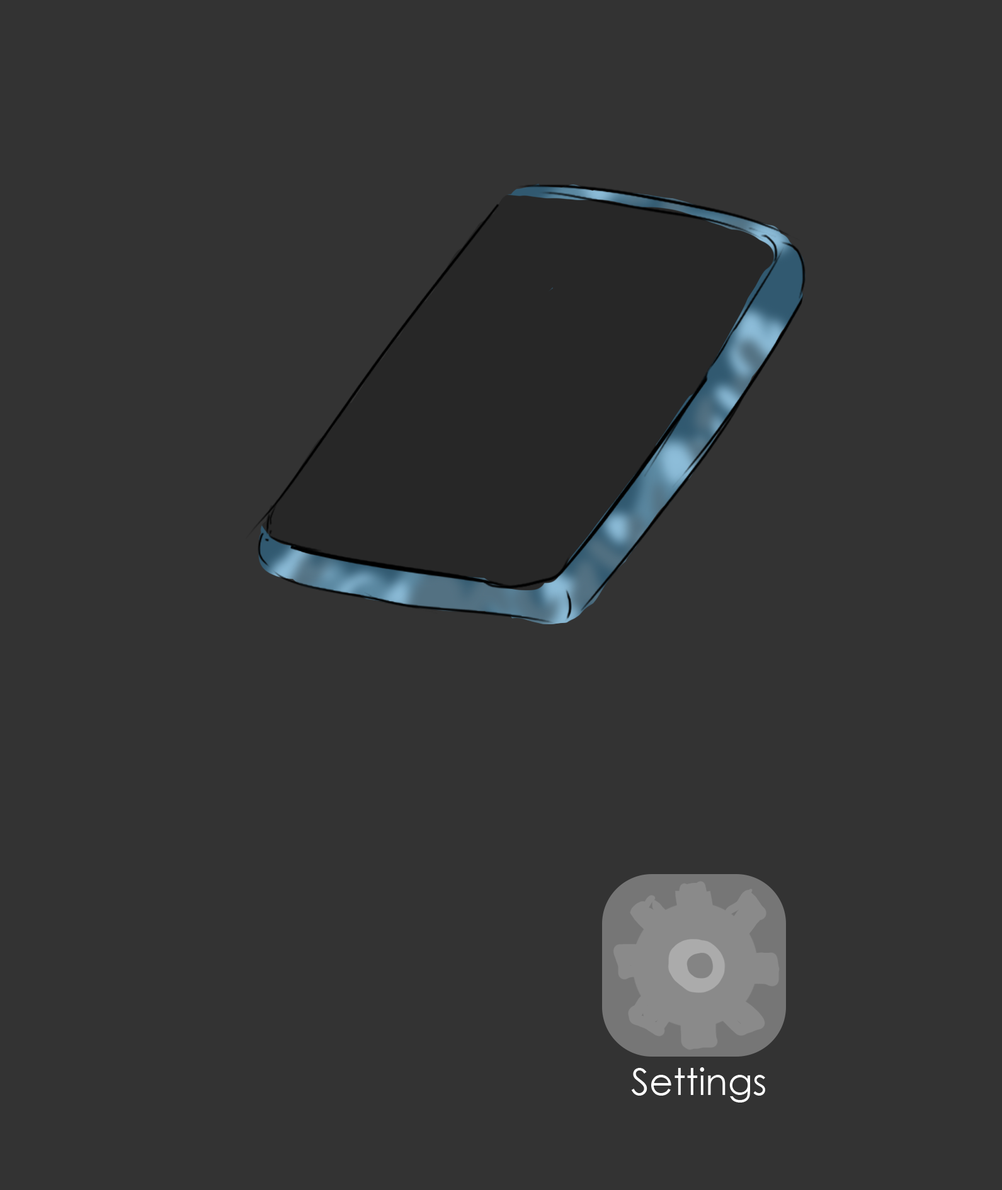
<style>
.page{position:relative;width:1002px;height:1190px;background:#333333}
.page>*{position:absolute;margin:0}
.t1{font:36.7px "CenturyGothic";color:#ffffff}
</style>
<div class="page">
<p class="t1" style="left:631px;top:1068px;width:134px;height:35px">Settings</p>
</div>
